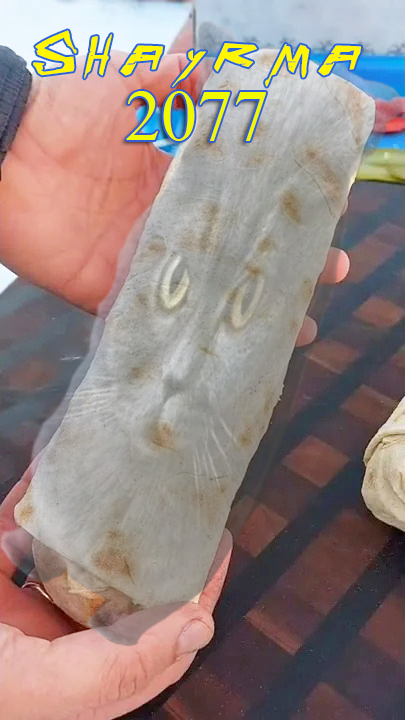
<style>
.page{position:relative;width:405px;height:720px}
.page>*{position:absolute;margin:0}
.t1{font:72px "Cyberpunk-Regular";color:#fff600}
.t2{font:72px "TimesNewRomanPSMT";color:#f0f900}
</style>
<div class="page">
<p class="t1" style="left:33px;top:30px;width:329px;height:57px">Shayrma</p>
<p class="t2" style="left:126px;top:91px;width:140px;height:50px">2077</p>
</div>
